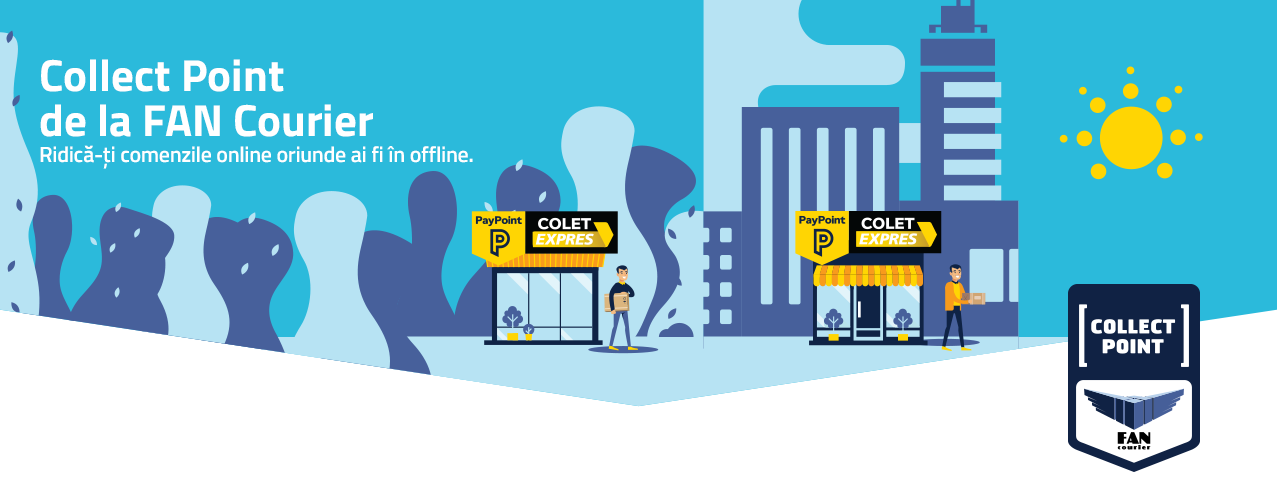
<style>
.page{position:relative;width:1277px;height:482px;background:#2bbadb}
.page>*{position:absolute;margin:0}
.t1{font:22px "TitilliumWeb-SemiBold";letter-spacing:-0.01em;color:#ffffff}
.t2{font:45px/45px "TitilliumWeb-Bold";color:#ffffff}
</style>
<div class="page">
<p class="t1" style="left:40px;top:59px;width:433px;height:110px"><span class="t2">Collect Point <br>de la FAN Courier<br></span>Ridică-ți comenzile online oriunde ai fi în offline.</p>
</div>
